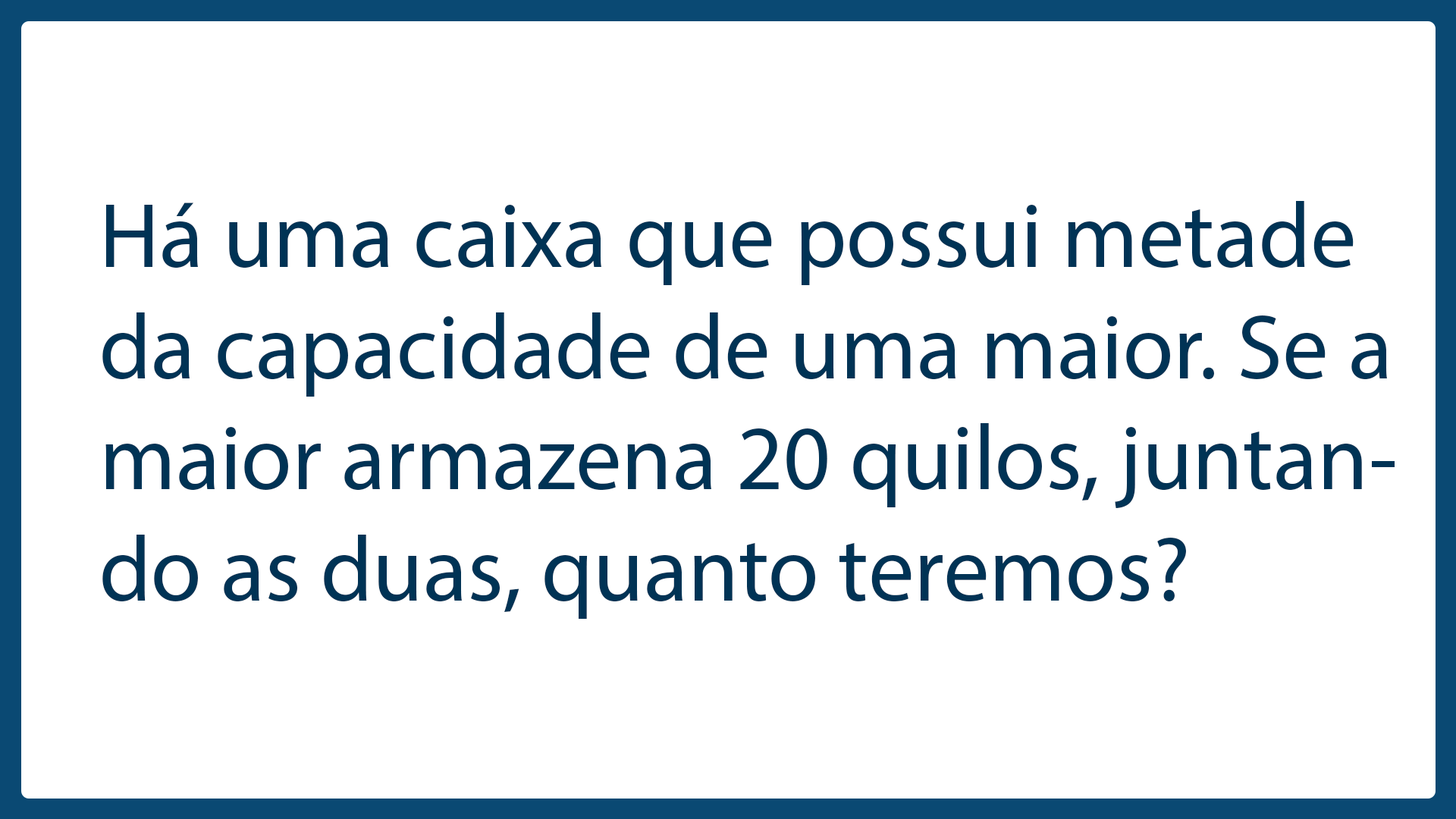
<style>
.page{position:relative;width:1456px;height:819px;background:#ffffff}
.page>*{position:absolute;margin:0}
.t1{font:92.6px "MyriadPro-Regular";color:#003355}
</style>
<div class="page">
<p class="t1" style="left:102px;top:201px;width:1293px;height:418px">Há uma caixa que possui metade da capacidade de uma maior. Se a maior armazena 20 quilos, juntando as duas, quanto teremos?</p>
</div>
